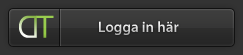
<style>
.page{position:relative;width:243px;height:55px}
.page>*{position:absolute;margin:0}
.t1{font:39.5px "SinhalaSangamMN"}
.t2{font:39.5px "SinhalaSangamMN";color:#99cd4e}
.t3{font:15px "MyriadPro-Semibold"}
</style>
<div class="page">
<p class="t1" style="left:19px;top:15px;width:18px;height:23px;rotate:180deg">D</p>
<p class="t2" style="left:36px;top:15px;width:18px;height:23px">T</p>
<p class="t3" style="left:99px;top:21px;width:80px;height:14px">Logga in här</p>
</div>
